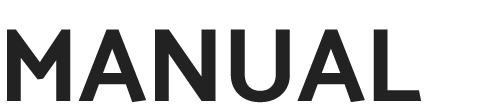
<style>
.page{position:relative;width:479px;height:105px;background:#ffffff}
.page>*{position:absolute;margin:0}
.t1{font:105px "Catamaran-Bold";letter-spacing:-0.01em;color:#222222}
</style>
<div class="page">
<p class="t1" style="left:7px;top:29px;width:414px;height:74px">MANUAL</p>
</div>
